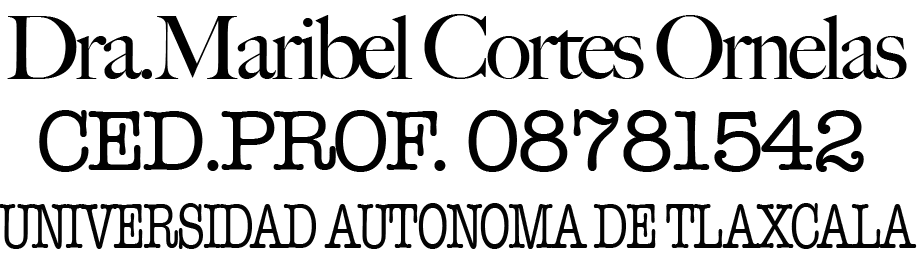
<style>
.page{position:relative;width:918px;height:260px;background:#ffffff}
.page>*{position:absolute;margin:0}
.t1{font:87.5px "BigCaslon-Medium";letter-spacing:-0.05em;color:#000000}
.t2{font:87.5px "AmericanTypewriter";letter-spacing:-0.05em;color:#010101}
.t3{font:65.4px "AmericanTypewriter";letter-spacing:-0.05em;color:#030303;scale:0.73 1}
</style>
<div class="page">
<p class="t1" style="left:7px;top:14px;width:900px;height:65px">Dra.Maribel Cortes Ornelas</p>
<p class="t2" style="left:39px;top:109px;width:825px;height:63px">CED.PROF. 08781542</p>
<p class="t3" style="left:0px;top:203px;width:917px;height:46px">UNIVERSIDAD AUTONOMA DE TLAXCALA</p>
</div>
